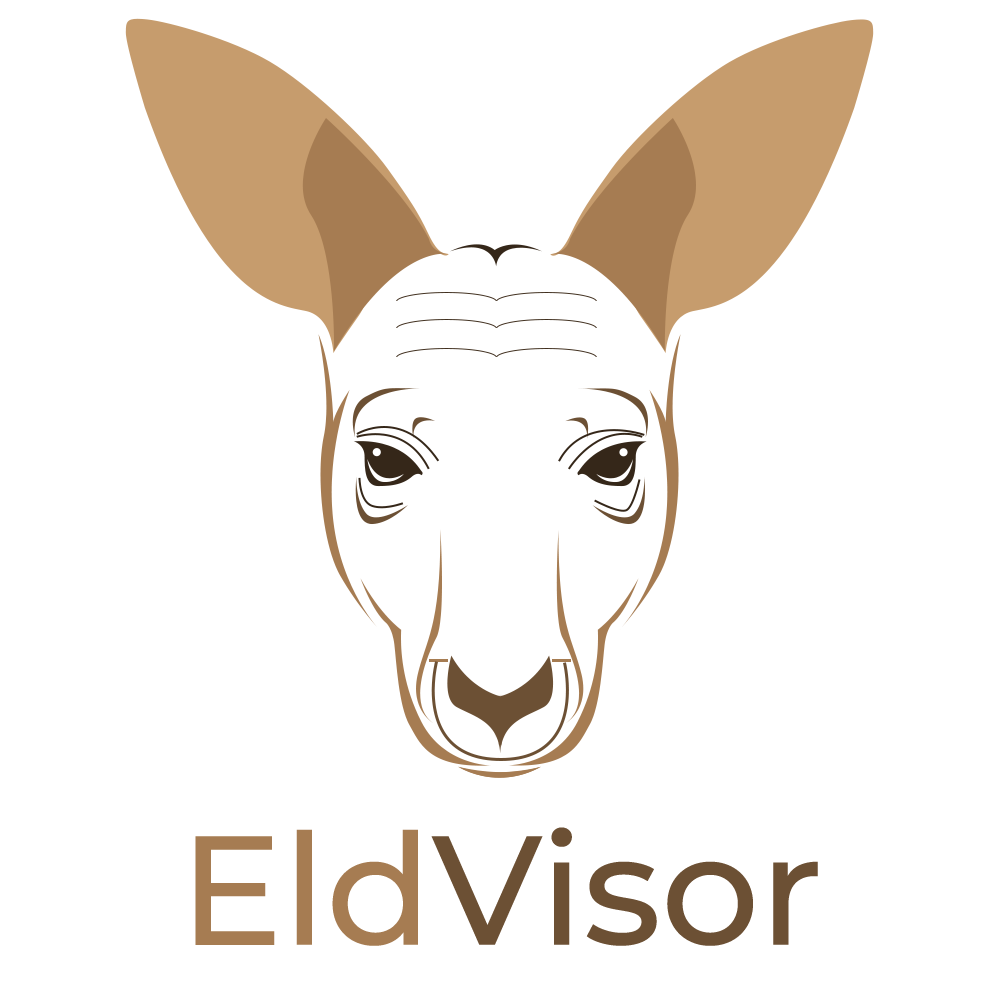
<style>
.page{position:relative;width:1000px;height:1000px;background:#ffffff}
.page>*{position:absolute;margin:0}
.t1{font:155px "Montserrat-Medium";color:#6c5034}
.t2{font:155px "Montserrat-Medium";color:#a67c52}
</style>
<div class="page">
<p class="t1" style="left:195px;top:827px;width:623px;height:119px"><span class="t2">Eld</span>Visor</p>
</div>
